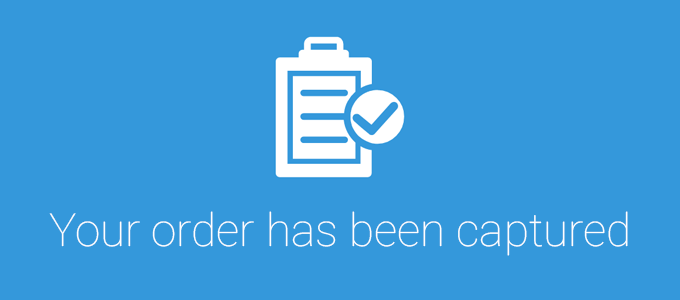
<style>
.page{position:relative;width:680px;height:300px;background:#3498db}
.page>*{position:absolute;margin:0}
.t1{font:45.8px "Roboto-Thin";color:#ffffff}
</style>
<div class="page">
<p class="t1" style="left:49px;top:211px;width:579px;height:45px">Your order has been captured</p>
</div>
